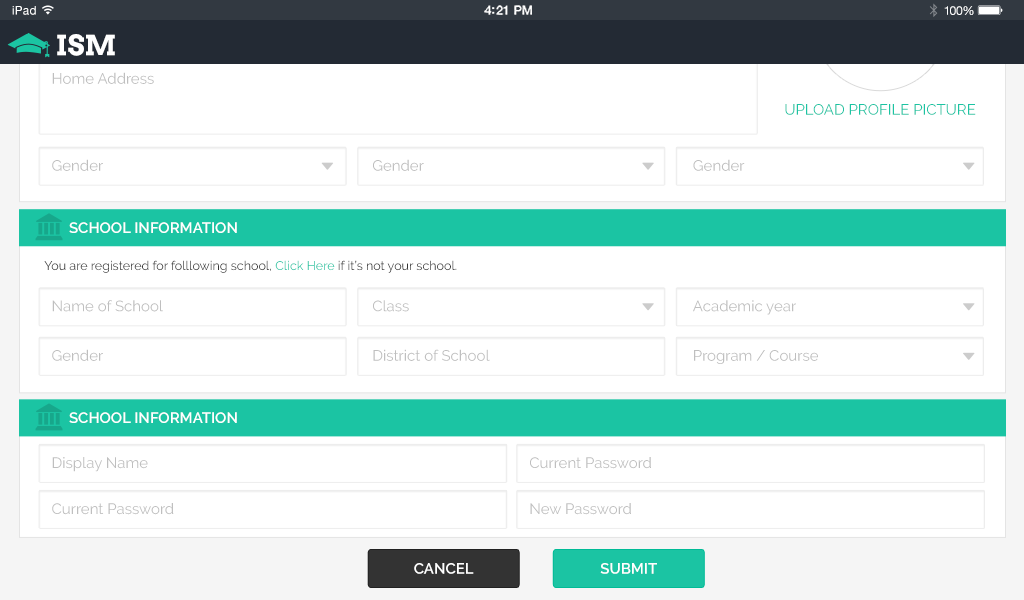
<style>
.page{position:relative;width:1024px;height:600px;background:#ffffff}
.page>*{position:absolute;margin:0}
.t1{font:12px "HelveticaNeue";letter-spacing:0.02em;color:#ffffff}
.t2{font:12.5px "HelveticaNeue-Medium";letter-spacing:-0.02em;color:#ffffff}
.t3{font:12px "HelveticaNeue";letter-spacing:-0.02em;color:#ffffff}
.t4{font:27.8px "Arvo-Bold";color:#ffffff}
.t5{font:15px "Raleway-Regular";color:#bfbfbf}
.t6{font:15px "Raleway-Regular";color:#1bc4a3;text-transform:uppercase}
.t7{font:15px "Raleway-SemiBold";color:#ffffff;text-transform:uppercase}
.t8{font:12.5px "Raleway-Regular";color:#333333}
.t9{font:12.5px "Raleway-Regular";color:#1bc4a3}
</style>
<div class="page">
<p class="t1" style="left:12px;top:6px;width:24px;height:9px">iPad</p>
<p class="t2" style="left:484px;top:5px;width:48px;height:10px">4:21 PM</p>
<p class="t3" style="left:944px;top:6px;width:30px;height:9px">100%</p>
<p class="t4" style="left:57px;top:34px;width:58px;height:22px">ISM</p>
<p class="t5" style="left:52px;top:72px;width:102px;height:12px">Home Address</p>
<p class="t6" style="left:785px;top:104px;width:191px;height:11px">Upload Profile Picture</p>
<p class="t5" style="left:52px;top:159px;width:51px;height:12px">Gender</p>
<p class="t5" style="left:373px;top:159px;width:51px;height:12px">Gender</p>
<p class="t5" style="left:693px;top:159px;width:52px;height:12px">Gender</p>
<p class="t7" style="left:69px;top:222px;width:168px;height:11px">School Information</p>
<p class="t8" style="left:44px;top:260px;width:413px;height:13px">You are registered for folllowing school, <span class="t9">Click Here</span> if it’s not your school.</p>
<p class="t5" style="left:52px;top:300px;width:111px;height:12px">Name of School</p>
<p class="t5" style="left:373px;top:300px;width:36px;height:12px">Class</p>
<p class="t5" style="left:693px;top:300px;width:103px;height:15px">Academic year</p>
<p class="t5" style="left:52px;top:349px;width:51px;height:12px">Gender</p>
<p class="t5" style="left:373px;top:349px;width:117px;height:12px">District of School</p>
<p class="t5" style="left:694px;top:350px;width:124px;height:14px">Program / Course</p>
<p class="t7" style="left:69px;top:412px;width:168px;height:11px">School Information</p>
<p class="t5" style="left:52px;top:457px;width:96px;height:15px">Display Name</p>
<p class="t5" style="left:530px;top:457px;width:121px;height:12px">Current Password</p>
<p class="t5" style="left:52px;top:503px;width:122px;height:12px">Current Password</p>
<p class="t5" style="left:530px;top:503px;width:101px;height:12px">New Password</p>
<p class="t7" style="left:414px;top:563px;width:60px;height:11px">Cancel</p>
<p class="t7" style="left:600px;top:563px;width:57px;height:11px">Submit</p>
</div>
